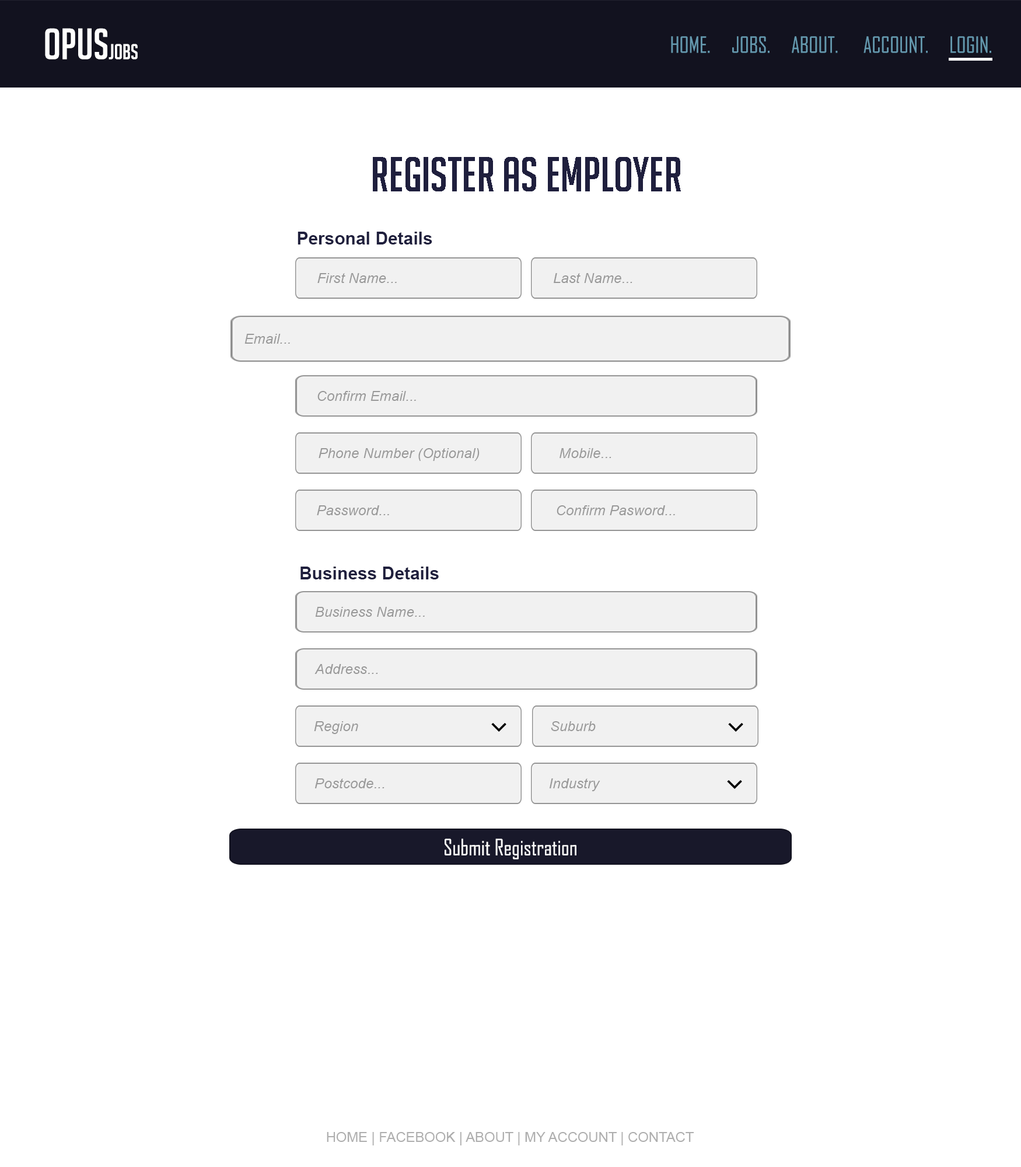
<style>
.page{position:relative;width:1021px;height:1167px;background:#ffffff}
.page>*{position:absolute;margin:0}
.t1{font:42.6px "BigNoodleTitling";color:#fefefe}
.t2{font:21px "BigNoodleTitling";color:#fefefe}
.t3{font:21.2px "AgencyFB-Reg";color:#6498ae}
.t4{font:47.9px "BigNoodleTitling";color:#1f1f3d}
.t5{font:17.5px "Arial-BoldMT";color:#1f1f3d}
.t6{font:14.2px "Arial-ItalicMT";color:#999999}
.t7{font:21.6px "AgencyFB-Reg";color:#fefefe}
.t8{font:13.9px "ArialMT";color:#aeaeae}
</style>
<div class="page">
<p class="t1" style="left:45px;top:28px;width:93px;height:32px">OPUS<span class="t2">Jobs</span></p>
<p class="t3" style="left:671px;top:36px;width:321px;height:17px">HOME.     JOBS.     ABOUT.      ACCOUNT.     LOGIN.</p>
<p class="t4" style="left:373px;top:157px;width:308px;height:34px">REGISTER AS EMPLOYER</p>
<p class="t5" style="left:298px;top:232px;width:135px;height:13px">Personal Details</p>
<p class="t6" style="left:318px;top:273px;width:79px;height:10px">First Name...</p>
<p class="t6" style="left:554px;top:273px;width:79px;height:10px">Last Name...</p>
<p class="t6" style="left:245px;top:334px;width:45px;height:10px">Email...</p>
<p class="t6" style="left:318px;top:391px;width:98px;height:10px">Confirm Email...</p>
<p class="t6" style="left:319px;top:448px;width:161px;height:13px">Phone Number (Optional)</p>
<p class="t6" style="left:560px;top:448px;width:52px;height:10px">Mobile...</p>
<p class="t6" style="left:317px;top:505px;width:72px;height:10px">Password...</p>
<p class="t6" style="left:557px;top:505px;width:118px;height:10px">Confirm Pasword...</p>
<p class="t5" style="left:301px;top:567px;width:138px;height:13px">Business Details</p>
<p class="t6" style="left:315px;top:607px;width:110px;height:10px">Business Name...</p>
<p class="t6" style="left:315px;top:664px;width:63px;height:10px">Address...</p>
<p class="t6" style="left:314px;top:721px;width:44px;height:13px">Region</p>
<p class="t6" style="left:551px;top:721px;width:45px;height:10px">Suburb</p>
<p class="t6" style="left:315px;top:779px;width:70px;height:10px">Postcode...</p>
<p class="t6" style="left:549px;top:779px;width:52px;height:12px">Industry</p>
<p class="t7" style="left:445px;top:839px;width:132px;height:21px">Submit Registration</p>
<p class="t8" style="left:327px;top:1132px;width:368px;height:14px">HOME | FACEBOOK | ABOUT | MY ACCOUNT | CONTACT</p>
</div>
